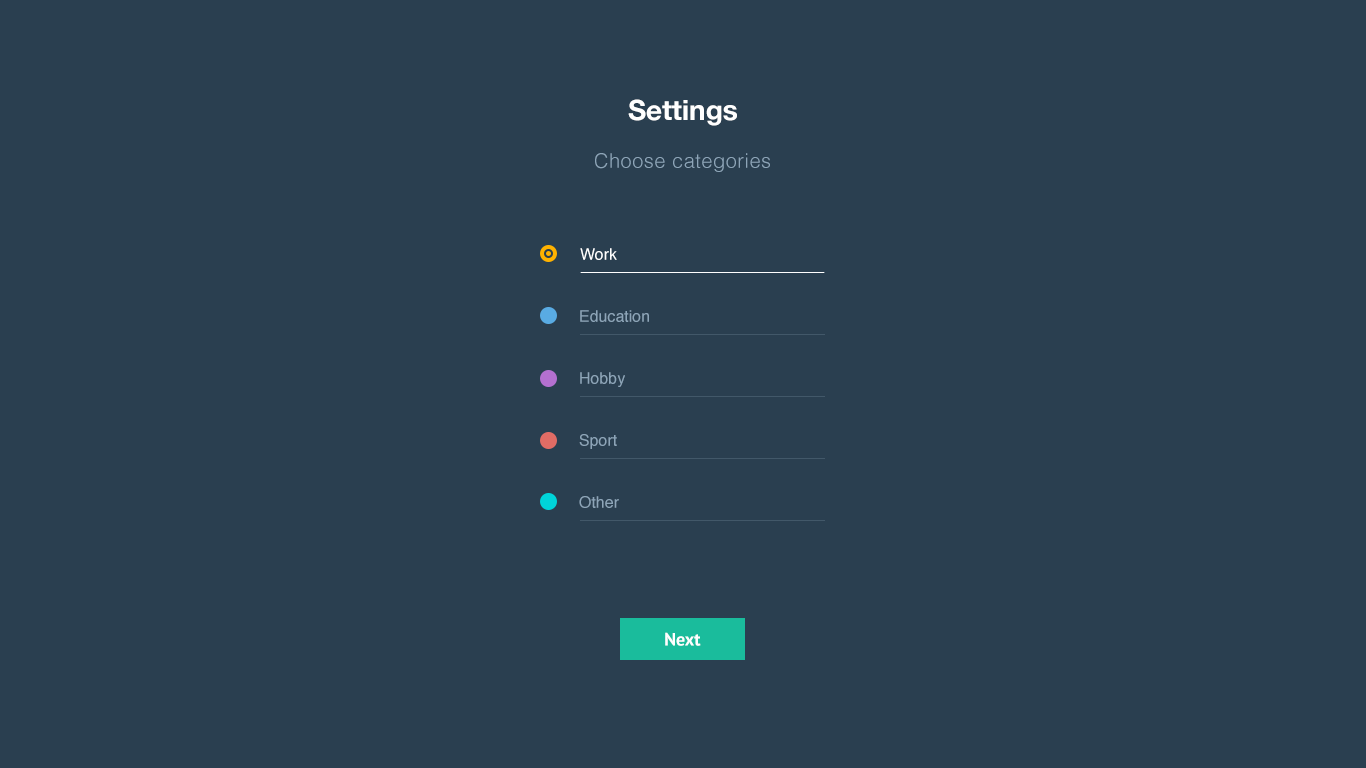
<style>
.page{position:relative;width:1366px;height:768px;background:#2a3f50}
.page>*{position:absolute;margin:0}
.t1{font:28px "HelveticaNeue-Bold";color:#ffffff}
.t2{font:20px "Helvetica-Light";letter-spacing:0.025em;color:#8da5b8}
.t3{font:16px "Helvetica";color:#ffffff}
.t4{font:16px "Helvetica";color:#8da5b8}
.t5{font:18px "PTSans-Bold";color:#ffffff}
</style>
<div class="page">
<p class="t1" style="left:628px;top:99px;width:109px;height:27px">Settings</p>
<p class="t2" style="left:595px;top:153px;width:175px;height:19px">Choose categories</p>
<p class="t3" style="left:580px;top:248px;width:37px;height:12px">Work</p>
<p class="t4" style="left:580px;top:310px;width:69px;height:12px">Education</p>
<p class="t4" style="left:580px;top:372px;width:45px;height:15px">Hobby</p>
<p class="t4" style="left:579px;top:434px;width:38px;height:15px">Sport</p>
<p class="t4" style="left:579px;top:496px;width:40px;height:12px">Other</p>
<p class="t5" style="left:665px;top:632px;width:36px;height:14px">Next</p>
</div>
